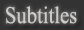
<style>
.page{position:relative;width:84px;height:30px;background:#333333}
.page>*{position:absolute;margin:0}
.t1{font:24px "TimesNewRomanPSMT";color:#cdcbc9;scale:0.86 1}
</style>
<div class="page">
<p class="t1" style="left:6px;top:6px;width:71px;height:18px">Subtitles</p>
</div>
